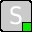
<style>
.page{position:relative;width:32px;height:32px;background:#cacaca}
.page>*{position:absolute;margin:0}
.t1{font:24px "DejaVuSansCondensed";color:#ffffff}
</style>
<div class="page">
<p class="t1" style="left:10px;top:6px;width:12px;height:19px">S</p>
</div>
